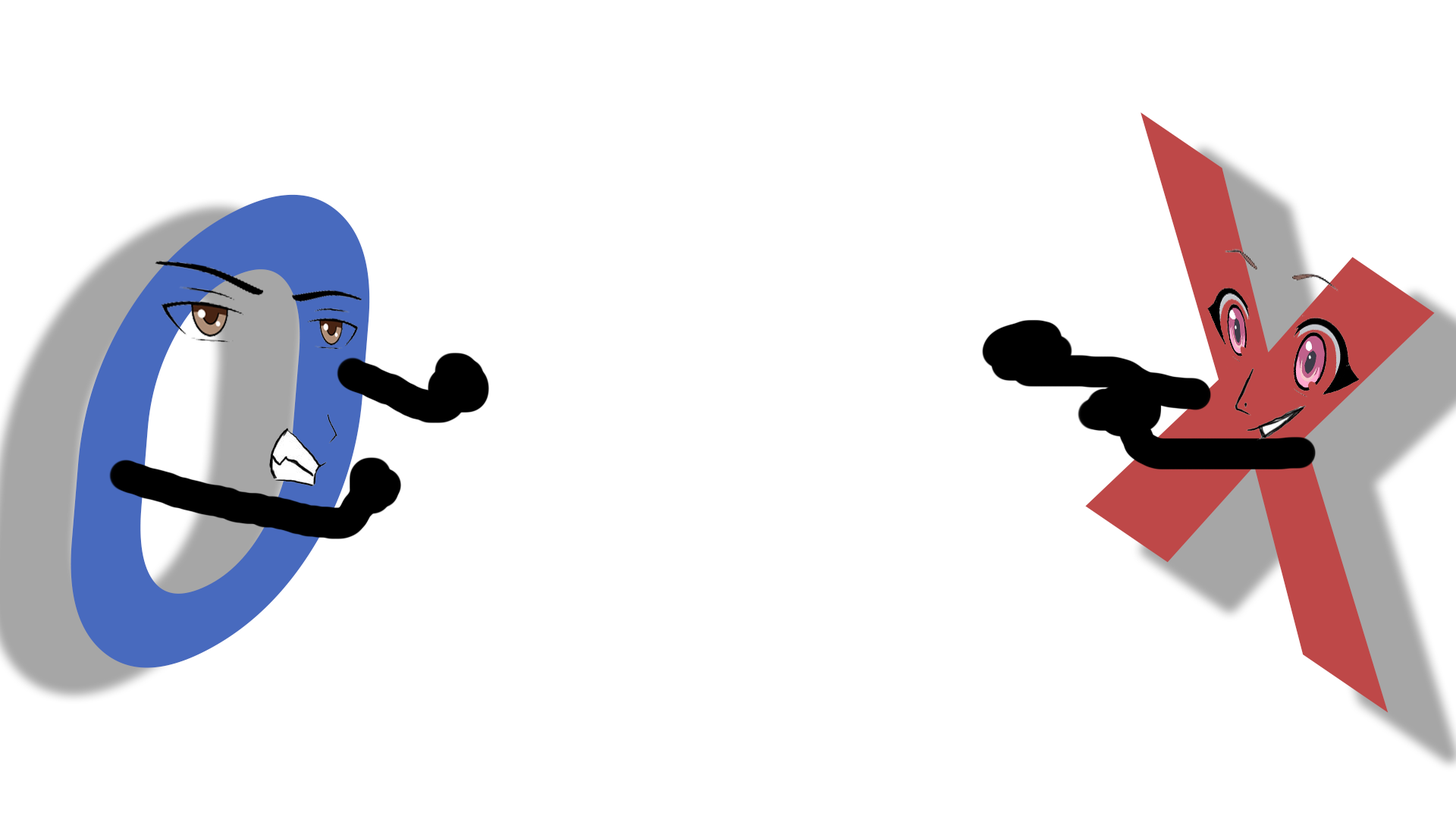
<style>
.page{position:relative;width:1456px;height:819px;background:#ffffff}
.page>*{position:absolute;margin:0}
.t1{font:606.7px "Roboto-BoldItalic";color:#be4848}
.t2{font:570.8px "Roboto-BoldItalic";color:#486abe;scale:0.95 1}
</style>
<div class="page">
<p class="t1" style="left:1085px;top:112px;width:350px;height:601px;rotate:34deg">X</p>
<p class="t2" style="left:71px;top:194px;width:299px;height:474px;rotate:-26deg">O</p>
</div>
